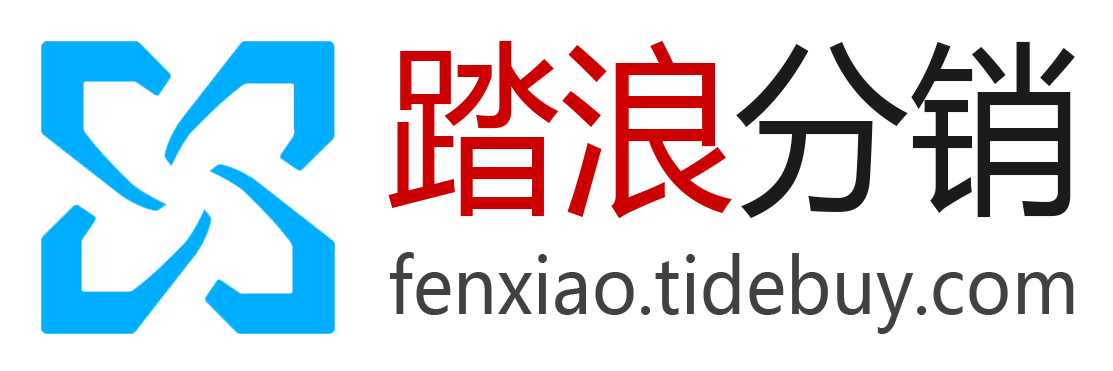
<style>
.page{position:relative;width:1113px;height:371px;background:#ffffff}
.page>*{position:absolute;margin:0}
.t1{font:181.7px "MicrosoftYaHei";color:#cc0000;scale:0.96 1}
.t2{font:181.7px "MicrosoftYaHei";color:#1b1b1b;scale:0.96 1}
.t3{font:75.5px "MicrosoftYaHei";color:#424242;scale:0.94 1}
</style>
<div class="page">
<p class="t1" style="left:388px;top:40px;width:687px;height:179px">踏浪<span class="t2">分销</span></p>
<p class="t3" style="left:389px;top:252px;width:685px;height:82px">fenxiao.tidebuy.com</p>
</div>
